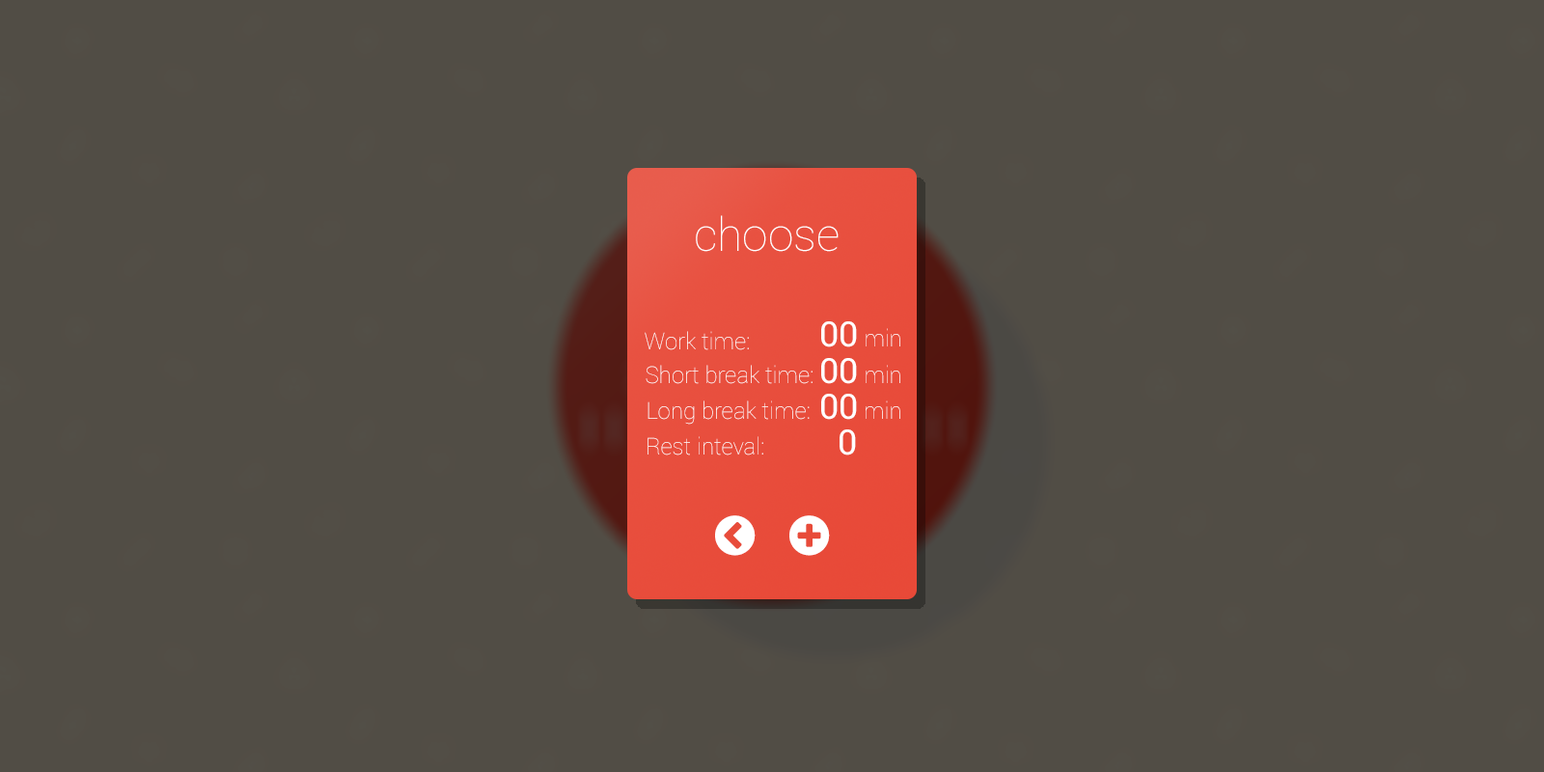
<style>
.page{position:relative;width:1544px;height:772px;background:#514d45}
.page>*{position:absolute;margin:0}
.t1{font:46.3px "Roboto-Thin";color:#ffffff}
.t2{font:23.2px "Roboto-Thin";color:#ffffff}
.t3{font:34.7px "Roboto-Regular";color:#ffffff}
</style>
<div class="page">
<p class="t1" style="left:696px;top:215px;width:143px;height:37px">choose</p>
<p class="t2" style="left:821px;top:321px;width:80px;height:26px"><span class="t3">00</span> min</p>
<p class="t2" style="left:645px;top:331px;width:104px;height:19px">Work time:</p>
<p class="t2" style="left:646px;top:365px;width:167px;height:19px">Short break time:</p>
<p class="t2" style="left:821px;top:358px;width:80px;height:26px"><span class="t3">00</span> min</p>
<p class="t2" style="left:648px;top:401px;width:162px;height:24px">Long break time:</p>
<p class="t2" style="left:821px;top:394px;width:80px;height:26px"><span class="t3">00</span> min</p>
<p class="t2" style="left:648px;top:436px;width:115px;height:20px">Rest inteval:</p>
<p class="t3" style="left:840px;top:430px;width:16px;height:26px">0</p>
</div>
